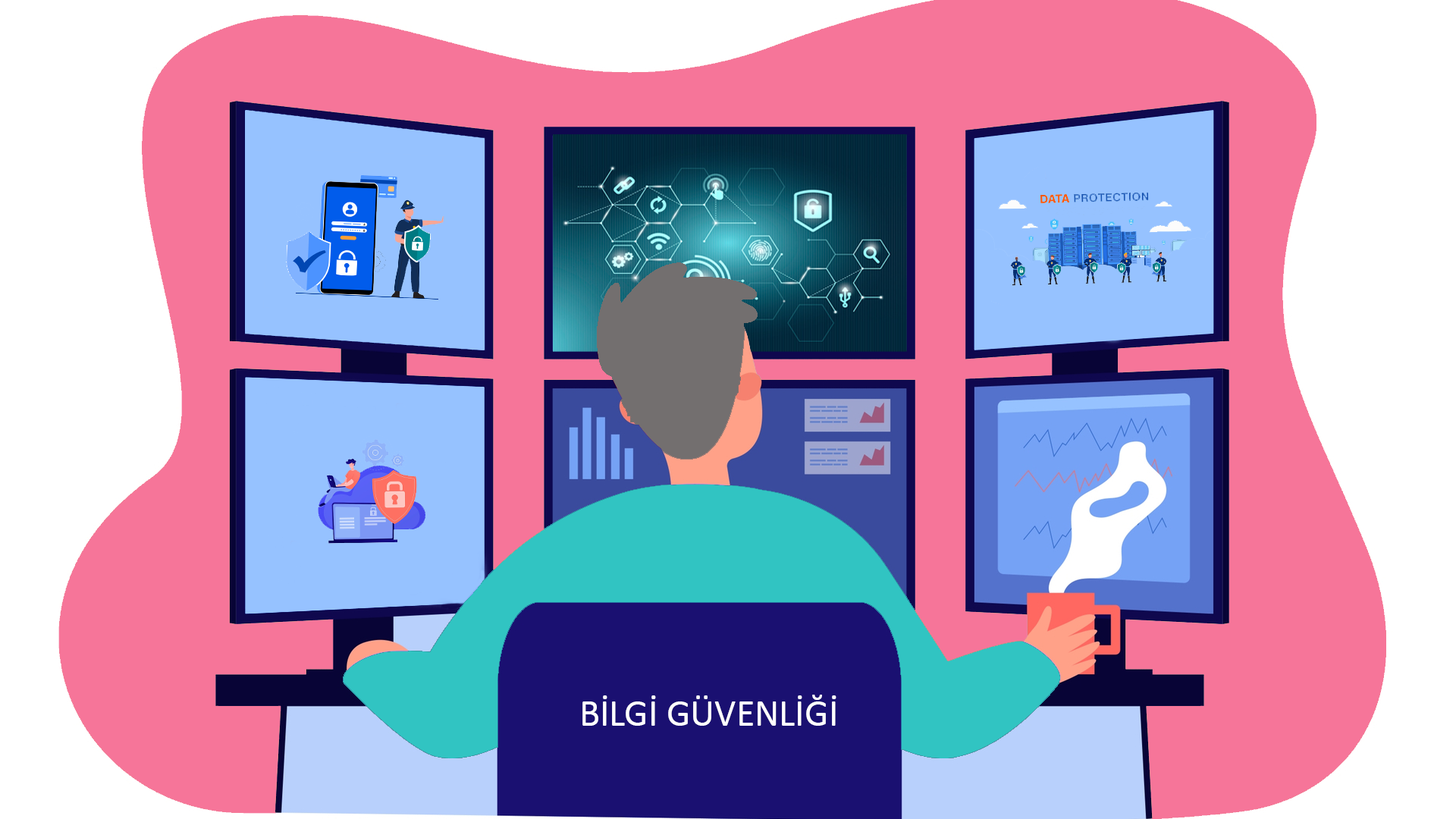
<style>
.page{position:relative;width:1456px;height:819px;background:#f67599}
.page>*{position:absolute;margin:0}
.t1{font:37.9px "Calibri";color:#ffffff}
</style>
<div class="page">
<p class="t1" style="left:582px;top:695px;width:254px;height:31px">BİLGİ GÜVENLİĞİ</p>
</div>
